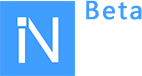
<style>
.page{position:relative;width:142px;height:76px;background:#ffffff}
.page>*{position:absolute;margin:0}
.t1{font:24px "MicrosoftYaHei";letter-spacing:0.08em;color:#409eff;font-weight:bold}
</style>
<div class="page">
<p class="t1" style="left:86px;top:0px;width:56px;height:20px">Beta</p>
</div>
